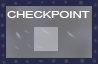
<style>
.page{position:relative;width:98px;height:64px;background:#28284b}
.page>*{position:absolute;margin:0}
.t1{font:9.3px "ArialMT";color:#ffffff;scale:1.35 1}
</style>
<div class="page">
<p class="t1" style="left:7px;top:11px;width:83px;height:7px">CHECKPOINT</p>
</div>
